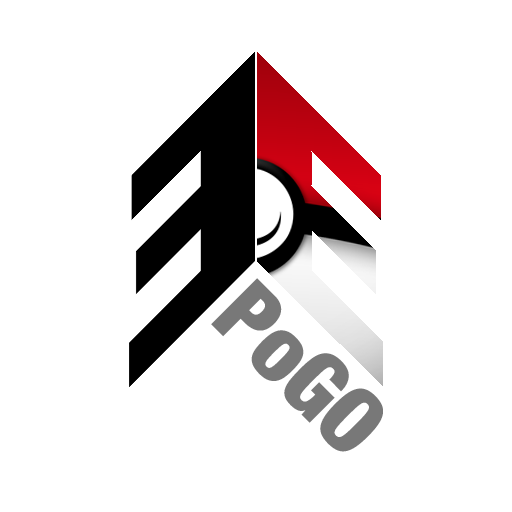
<style>
.page{position:relative;width:512px;height:512px;background:#ffffff}
.page>*{position:absolute;margin:0}
.t1{font:90.7px "HelveticaNeue-CondensedBlack";color:#787878}
</style>
<div class="page">
<p class="t1" style="left:211px;top:278px;width:172px;height:174px;rotate:45deg">PoGO</p>
</div>
